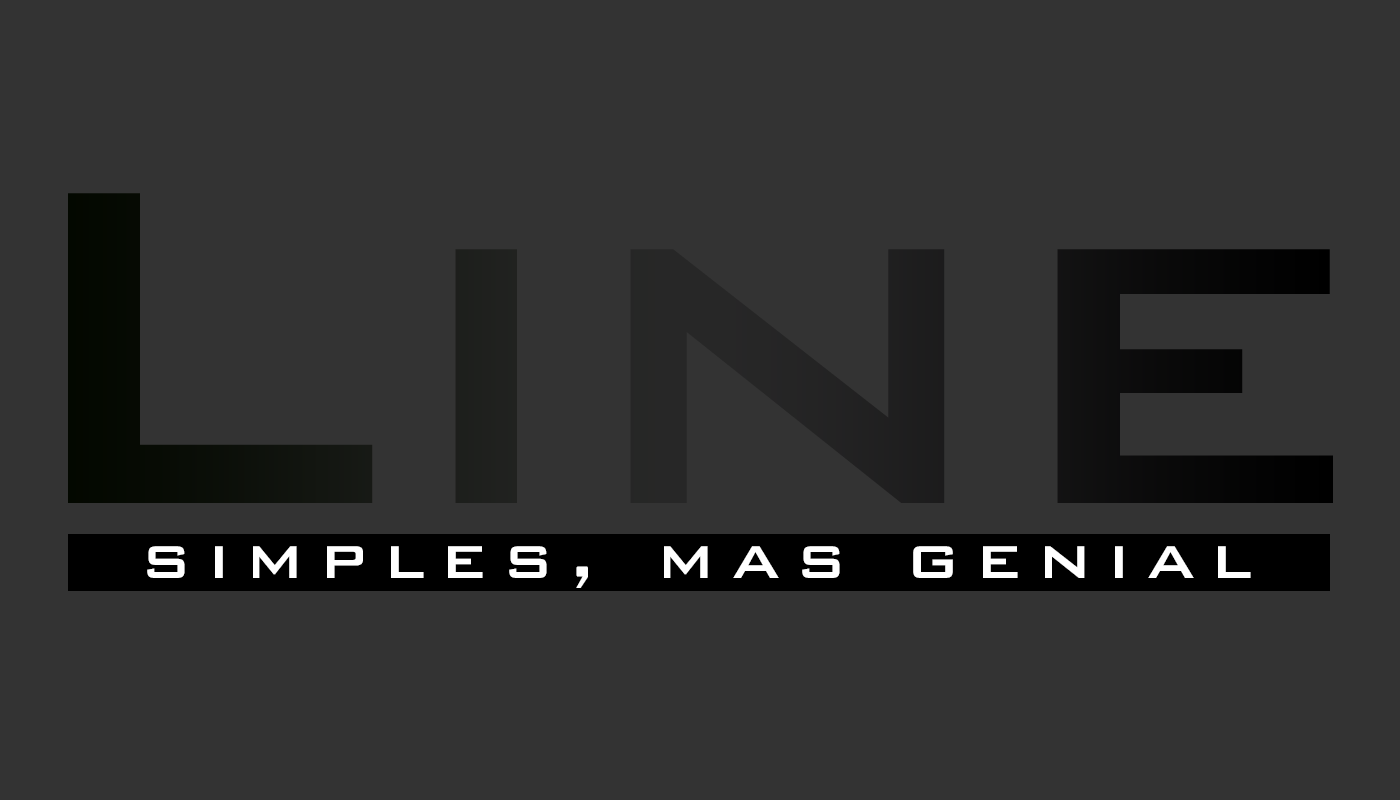
<style>
.page{position:relative;width:1400px;height:800px;background:#333333}
.page>*{position:absolute;margin:0}
.t1{font:600px "BankGothicBT-Medium";color:#111211}
.t2{font:75px "BankGothicBT-Medium";letter-spacing:0.22em;color:#ffffff}
</style>
<div class="page">
<p class="t1" style="left:68px;top:193px;width:1265px;height:310px">Line</p>
<p class="t2" style="left:147px;top:546px;width:1104px;height:42px">simples, mas genial</p>
</div>
